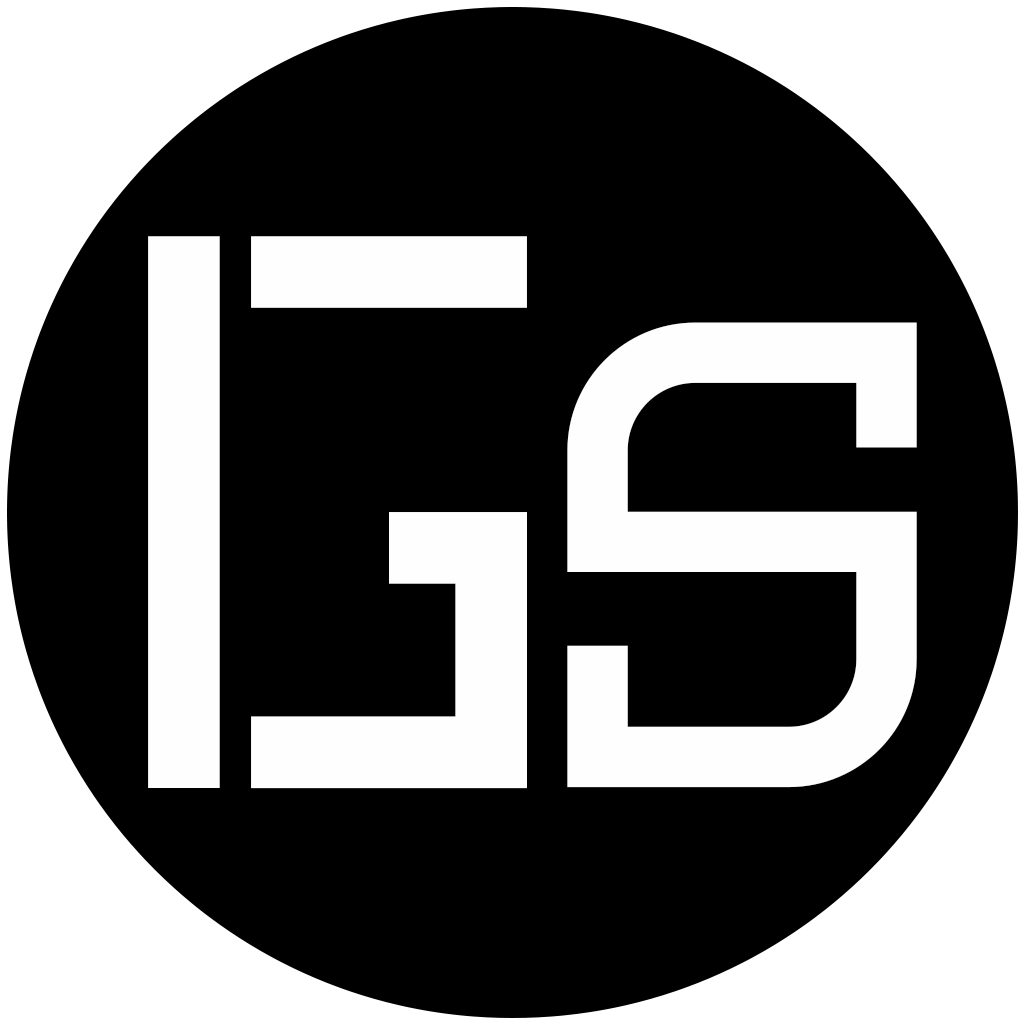
<style>
.page{position:relative;width:1024px;height:1024px;background:#000000}
.page>*{position:absolute;margin:0}
.t1{font:788.1px "GULAGPavljenkoRegular";color:#fefefe}
.t2{font:663.3px "GULAGPavljenkoRegular";color:#fefefe}
</style>
<div class="page">
<p class="t1" style="left:148px;top:236px;width:379px;height:553px">G</p>
<p class="t2" style="left:567px;top:322px;width:350px;height:466px">s</p>
</div>
